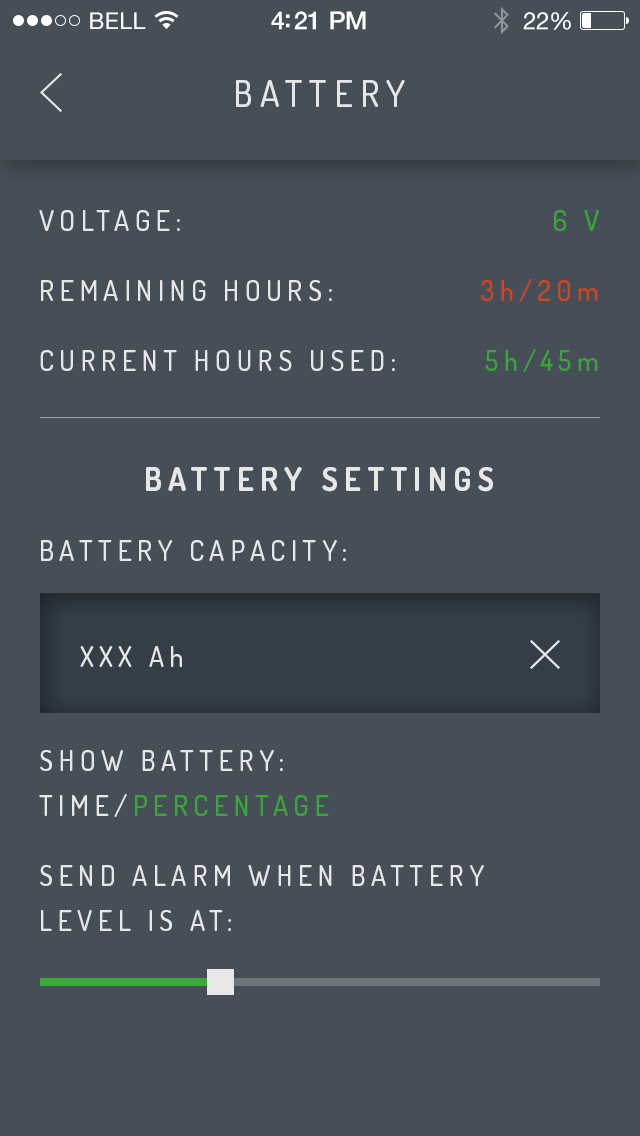
<style>
.page{position:relative;width:640px;height:1136px;background:#464f58}
.page>*{position:absolute;margin:0}
.t1{font:23px "HelveticaNeue";letter-spacing:0.02em;color:#ffffff}
.t2{font:25px "HelveticaNeue-Medium";letter-spacing:-0.02em;color:#ffffff}
.t3{font:24px "HelveticaNeue";letter-spacing:-0.02em;color:#ffffff}
.t4{font:36px "Dosis-Medium";letter-spacing:0.2em;color:#e8e7e8}
.t5{font:28px/70px "Dosis-Medium";letter-spacing:0.2em;color:#e8e7e8}
.t6{font:32px/50px "Dosis-Bold";letter-spacing:0.2em;color:#e8e7e8}
.t7{font:28px/45px "Dosis-Medium";letter-spacing:0.2em;color:#e8e7e8}
.t8{font:28px/45px "Dosis-Medium";letter-spacing:0.2em;color:#39a935}
.t9{font:28px/70px "Dosis-Medium";letter-spacing:0.2em;color:#d4451d}
.t10{font:28px/70px "Dosis-Medium";letter-spacing:0.2em;color:#39a935}
.t11{font:28px/106.1px "Dosis-Medium";letter-spacing:0.2em;color:#e8e7e8}
.t12{font:25.2px/106.1px "DINPro-Medium";letter-spacing:0.2em;color:#dacebe}
</style>
<div class="page">
<p class="t1" style="left:90px;top:12px;width:56px;height:17px">BELL</p>
<p class="t2" style="left:271px;top:11px;width:95px;height:19px">4:21 PM</p>
<p class="t3" style="left:523px;top:12px;width:48px;height:18px">22%</p>
<p class="t4" style="left:236px;top:80px;width:169px;height:27px">BATTERY</p>
<p class="t5" style="left:39px;top:210px;width:454px;height:721px">VOLTAGE:<br>REMAINING HOURS:<br>CURRENT HOURS USED:<br><br><span class="t6">BATTERY SETTINGS<br></span>BATTERY CAPACITY:<br><br><br>SHOW BATTERY:<br><span class="t7">TIME/</span><span class="t8">PERCENTAGE<br></span>SEND ALARM WHEN BATTERY <br><span class="t7">LEVEL IS AT:</span></p>
<p class="t9" style="left:481px;top:210px;width:118px;height:162px;text-align:right"><span class="t10">6 V<br></span>3h/20m<br><span class="t10">5h/45m</span></p>
<p class="t11" style="left:80px;top:646px;width:102px;height:21px">XXX Ah<br><span class="t12">ISCH</span></p>
</div>
